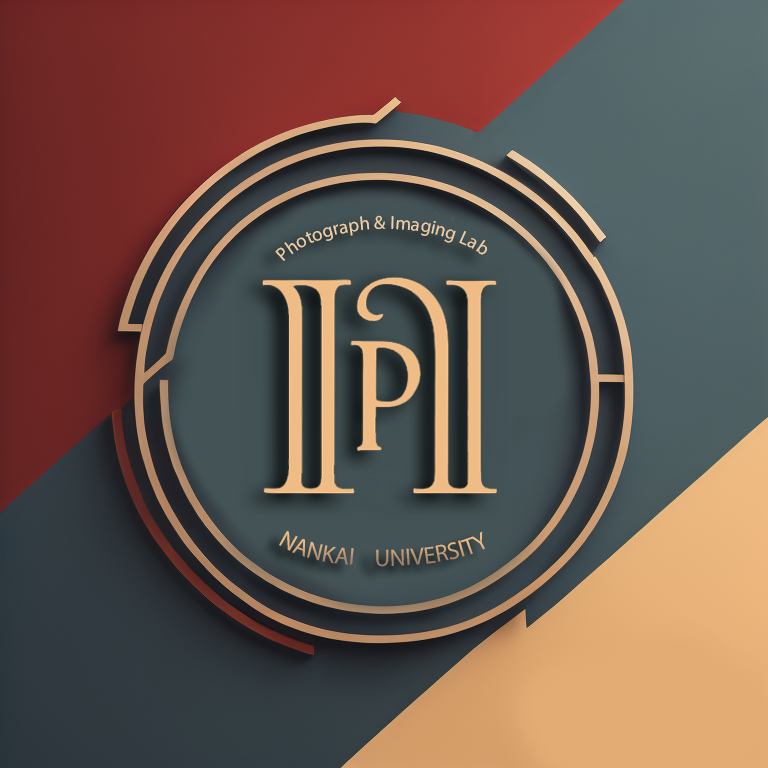
<style>
.page{position:relative;width:768px;height:768px}
.page>*{position:absolute;margin:0}
.t1{font:19px "MyriadPro-Regular";color:#f1cea7}
.t2{font:24px "MyriadPro-Regular"}
</style>
<div class="page">
<p class="t1" style="left:275px;top:215px;width:212px;height:46px">Photograph &amp; Imaging Lab</p>
<p class="t2" style="left:279px;top:530px;width:206px;height:37px">NANKAI    UNIVERSITY</p>
</div>
